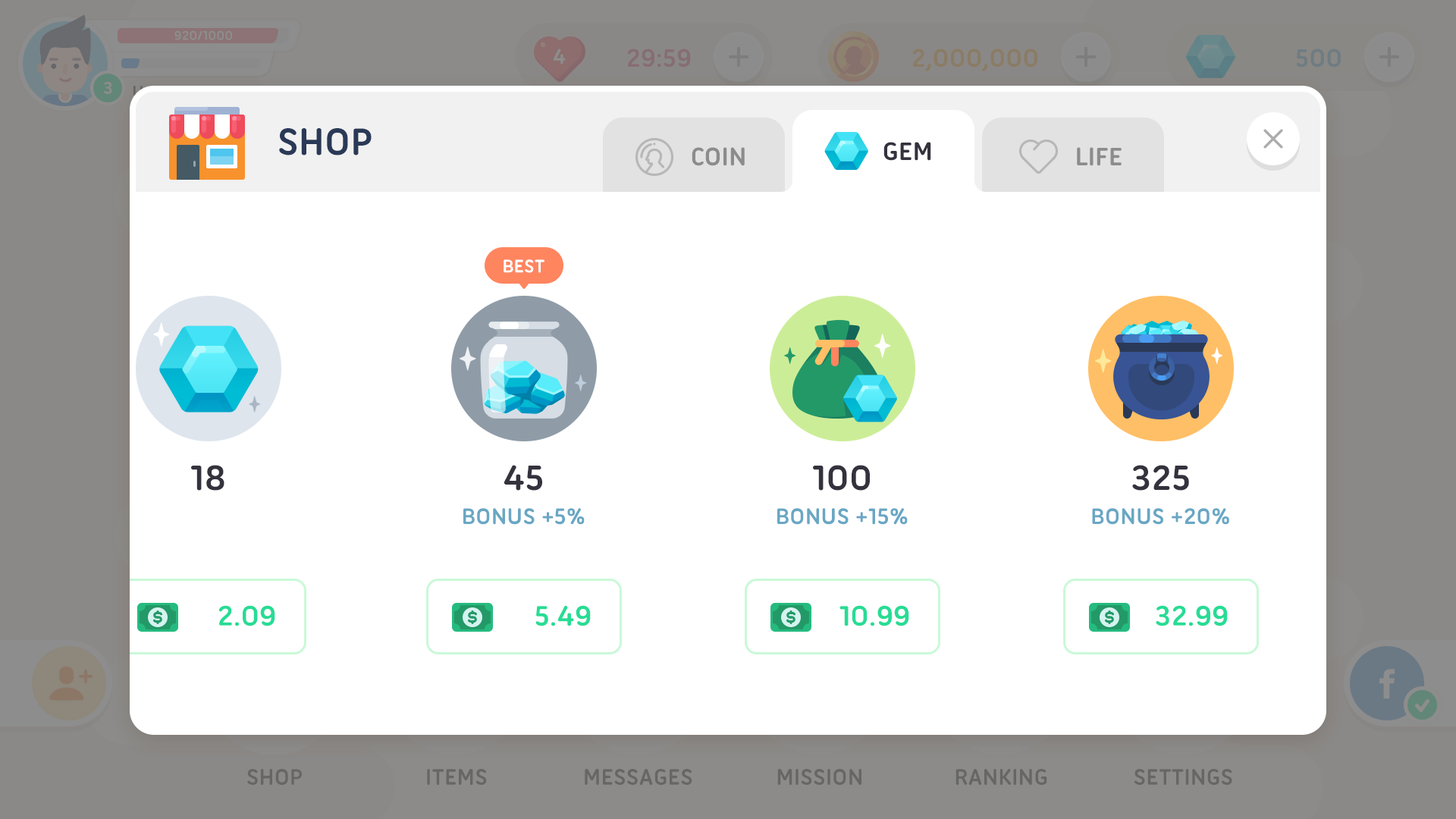
<style>
.page{position:relative;width:1456px;height:819px;background:#ffffff}
.page>*{position:absolute;margin:0}
.t1{font:40.9px "UbuntuTitling-Bold";color:#2a3957;text-transform:uppercase}
.t2{font:27.3px "UbuntuTitling-Bold";color:#8c8c8c;text-transform:uppercase}
.t3{font:27.3px "UbuntuTitling-Bold";color:#34323d;text-transform:uppercase}
.t4{font:19.7px "UbuntuTitling-Bold";color:#ffffff;text-transform:uppercase}
.t5{font:37.9px "UbuntuTitling-Bold";color:#34323d;text-transform:uppercase}
.t6{font:24.3px "UbuntuTitling-Bold";color:#69a7c4;text-transform:uppercase}
.t7{font:30.3px "UbuntuTitling-Bold";color:#27dc95;text-transform:uppercase}
</style>
<div class="page">
<p class="t1" style="left:279px;top:128px;width:93px;height:27px">shop</p>
<p class="t2" style="left:692px;top:147px;width:53px;height:19px">coin</p>
<p class="t3" style="left:883px;top:142px;width:48px;height:19px">gem</p>
<p class="t2" style="left:1077px;top:147px;width:45px;height:19px">life</p>
<p class="t4" style="left:504px;top:259px;width:40px;height:14px">Best</p>
<p class="t5" style="left:191px;top:465px;width:33px;height:26px">18</p>
<p class="t5" style="left:504px;top:465px;width:38px;height:26px">45</p>
<p class="t5" style="left:813px;top:465px;width:57px;height:26px">100</p>
<p class="t5" style="left:1132px;top:465px;width:57px;height:26px">325</p>
<p class="t6" style="left:463px;top:508px;width:122px;height:17px">bonus +5%</p>
<p class="t6" style="left:777px;top:508px;width:131px;height:17px">bonus +15%</p>
<p class="t6" style="left:1092px;top:508px;width:137px;height:17px">bonus +20%</p>
<p class="t7" style="left:218px;top:605px;width:57px;height:21px">2.09</p>
<p class="t7" style="left:535px;top:605px;width:56px;height:21px">5.49</p>
<p class="t7" style="left:839px;top:605px;width:70px;height:21px">10.99</p>
<p class="t7" style="left:1156px;top:605px;width:72px;height:21px">32.99</p>
</div>
